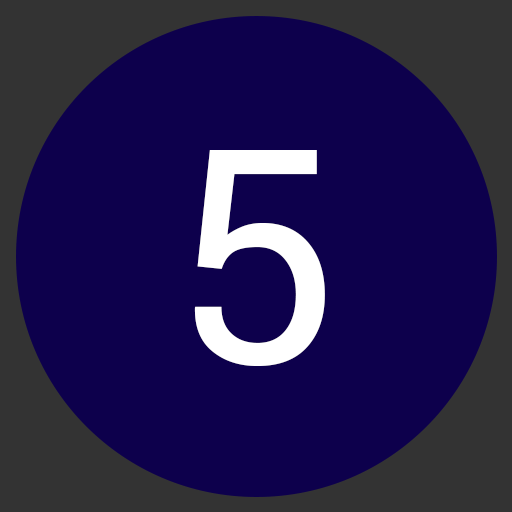
<style>
.page{position:relative;width:512px;height:512px;background:#0d004c}
.page>*{position:absolute;margin:0}
.t1{font:300px "Roboto-Regular";color:#ffffff}
</style>
<div class="page">
<p class="t1" style="left:194px;top:150px;width:131px;height:216px">5</p>
</div>
